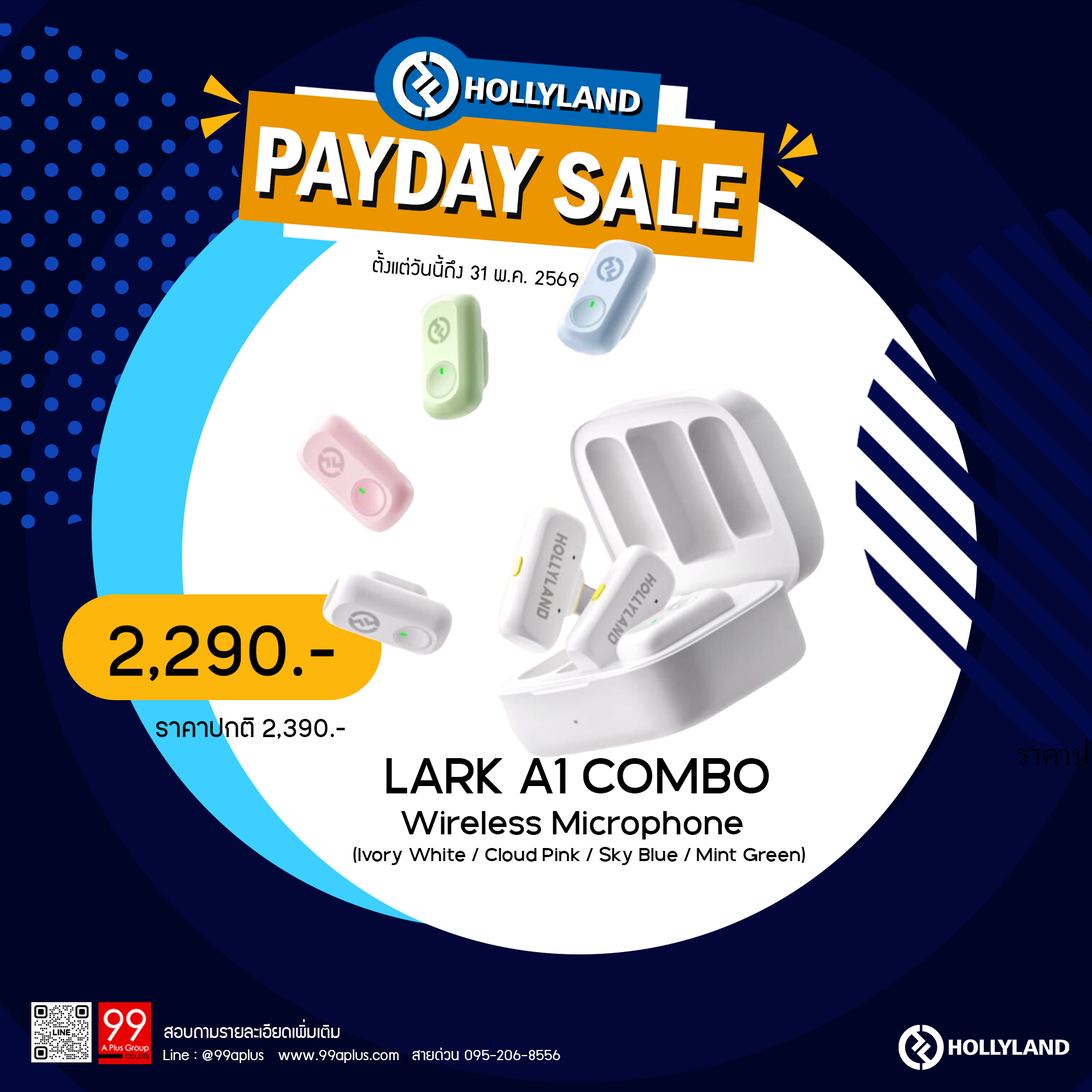
<style>
.page{position:relative;width:1092px;height:1092px;background:#ffffff}
.page>*{position:absolute;margin:0}
.t1{font:97.5px "FranklinGothic-DemiCond";color:#ffffff}
.t2{font:97.5px "FranklinGothic-DemiCond"}
.t3{font:23.2px "supermarket";color:#000000}
.t4{font:83.5px "PK-NakhonPathom-Demo";color:#000000}
.t5{font:30.3px "PK-NakhonPathom-Demo";color:#000000}
.t6{font:54px "GalakPro-Demo";color:#000000}
.t7{font:35.6px "GalakPro-Demo";color:#000000}
.t8{font:20.4px "GalakPro-Demo";color:#000000}
.t9{font:19.8px "supermarket";color:#ffffff}
.t10{font:17.2px "supermarket";color:#ffffff}
</style>
<div class="page">
<p class="t1" style="left:255px;top:126px;width:488px;height:105px;rotate:5deg">PAYDAY SALE</p>
<p class="t2" style="left:259px;top:133px;width:488px;height:105px;rotate:5deg">PAYDAY SALE</p>
<p class="t3" style="left:373px;top:250px;width:205px;height:37px;rotate:4deg">ตั้งแต่วันนี้ถึง 31 พ.ค. 2569</p>
<p class="t4" style="left:110px;top:625px;width:224px;height:56px">2,290.-</p>
<p class="t5" style="left:156px;top:717px;width:189px;height:22px">ราคาปกติ 2,390.-</p>
<p class="t6" style="left:386px;top:758px;width:383px;height:35px">LARK A1 COMBO</p>
<p class="t7" style="left:401px;top:811px;width:342px;height:28px">Wireless Microphone</p>
<p class="t8" style="left:353px;top:847px;width:452px;height:18px">(Ivory White / Cloud Pink / Sky Blue / Mint Green)</p>
<p class="t9" style="left:164px;top:1019px;width:176px;height:19px">สอบถามรายละเอียดเพิ่มเติม</p>
<p class="t10" style="left:163px;top:1049px;width:236px;height:14px">Line : @99aplus   www.99aplus.com</p>
<p class="t10" style="left:412px;top:1048px;width:148px;height:12px">สายด่วน 095-206-8556</p>
</div>
